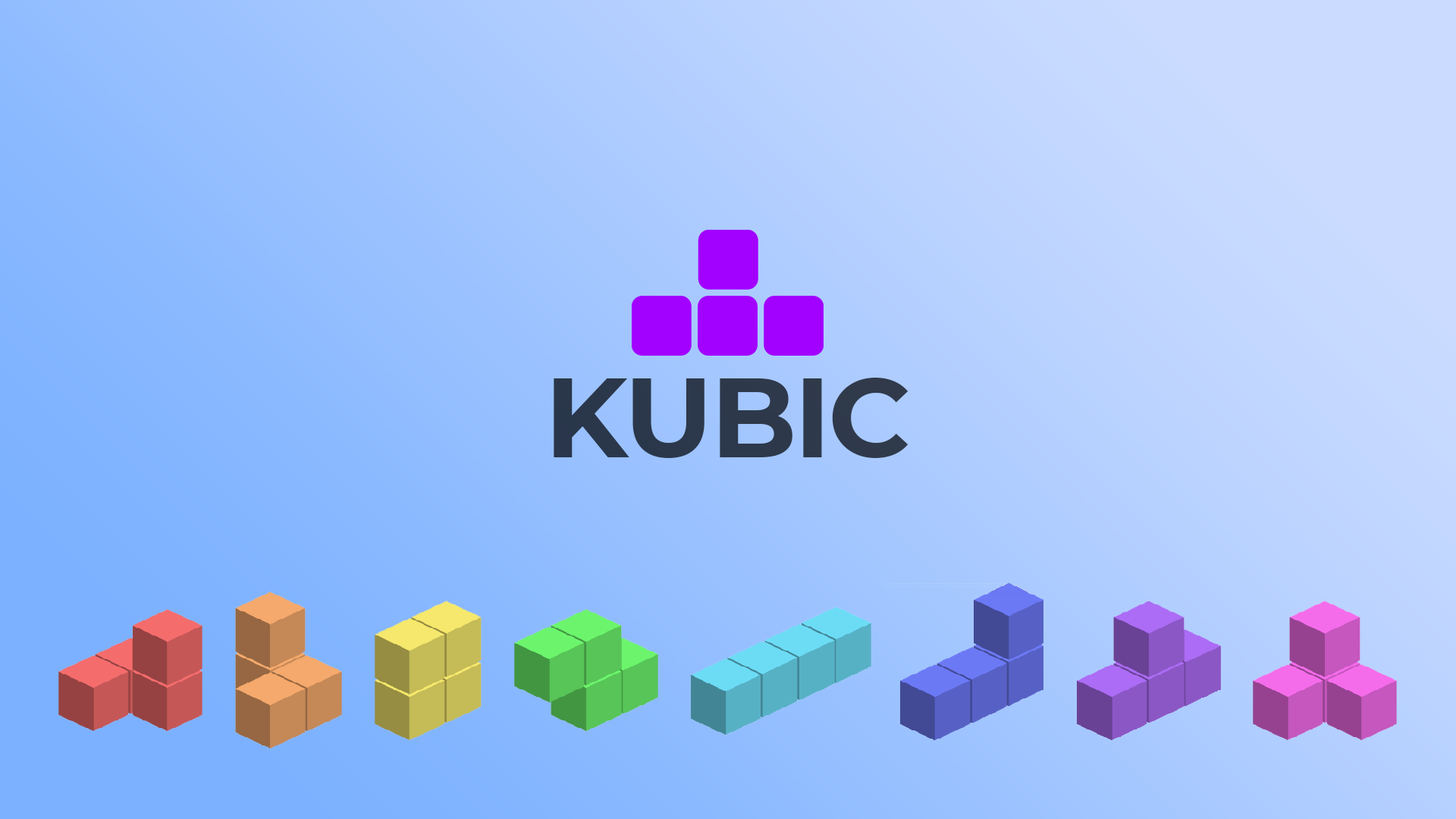
<style>
.page{position:relative;width:1456px;height:819px}
.page>*{position:absolute;margin:0}
.t1{font:112.8px "Montserrat-Bold";letter-spacing:-0.025em;color:#2d384b}
</style>
<div class="page">
<p class="t1" style="left:554px;top:378px;width:354px;height:80px">KUBIC</p>
</div>
